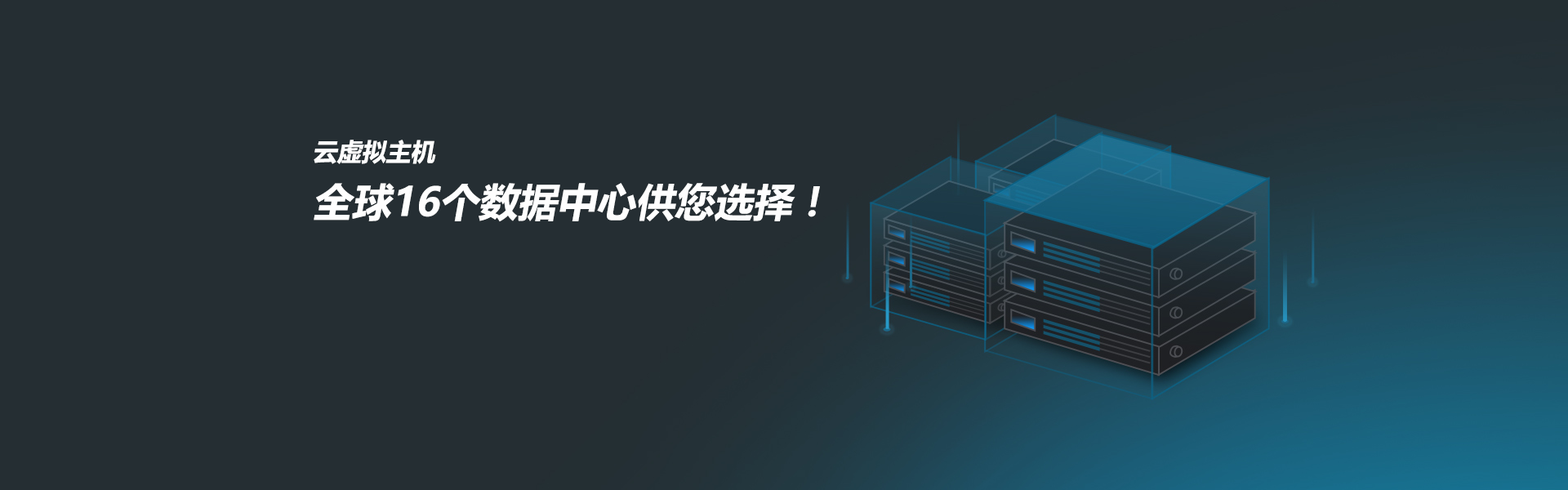
<style>
.page{position:relative;width:1568px;height:490px;background:#252e33}
.page>*{position:absolute;margin:0}
.t1{font:39.2px "MicrosoftYaHei-Bold";color:#fefefe;font-style:italic}
.t2{font:24.5px "MicrosoftYaHei-Bold";color:#fefefe;font-style:italic}
</style>
<div class="page">
<p class="t1" style="left:314px;top:140px;width:506px;height:82px"><span class="t2">云虚拟主机<br></span>全球16个数据中心供您选择！</p>
</div>
